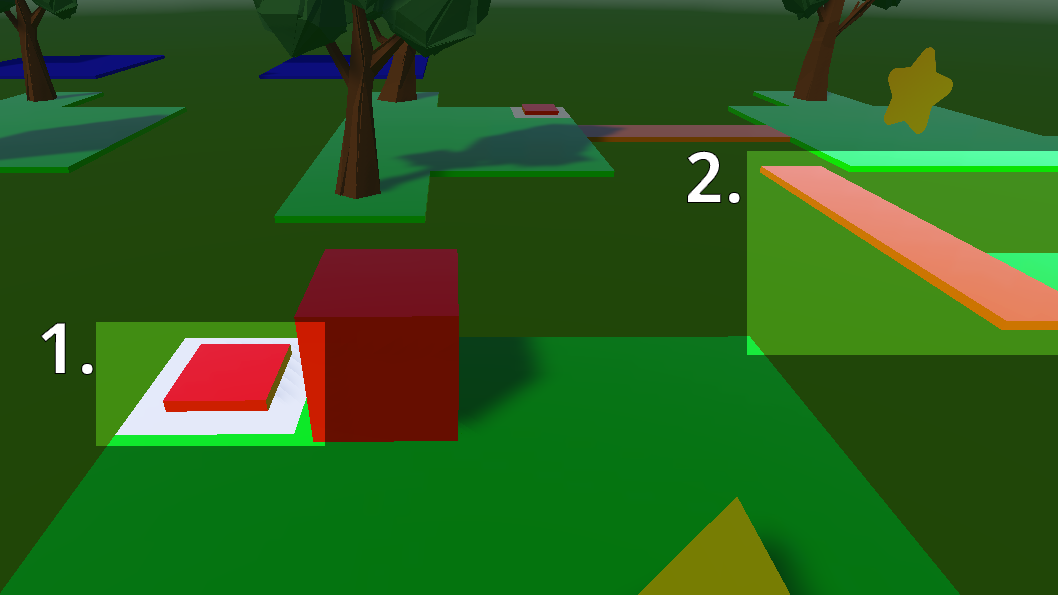
<style>
.page{position:relative;width:1058px;height:595px}
.page>*{position:absolute;margin:0}
.t1{font:72px "NotoSans-Bold";letter-spacing:0.01em;color:#ffffff}
</style>
<div class="page">
<p class="t1" style="left:686px;top:150px;width:55px;height:54px">2.</p>
<p class="t1" style="left:40px;top:322px;width:54px;height:53px">1.</p>
</div>
